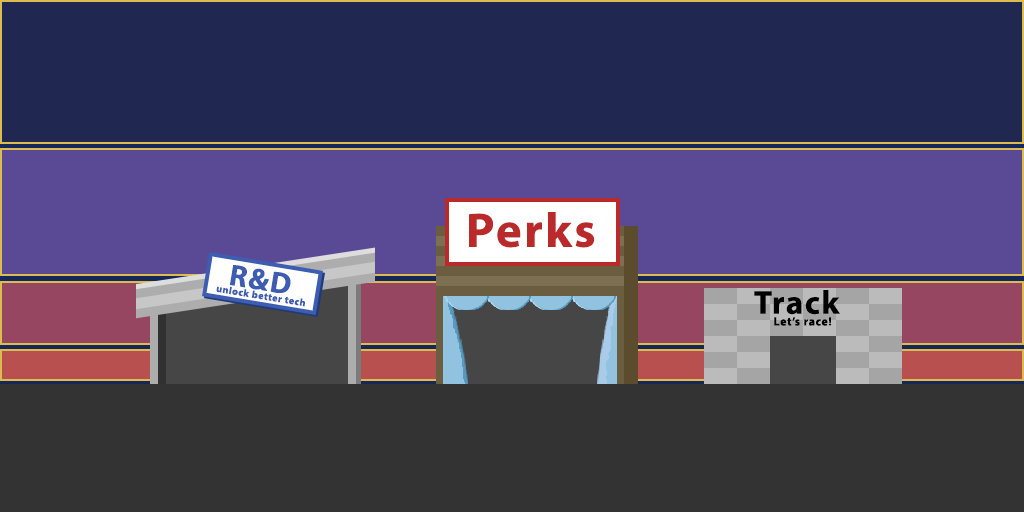
<style>
.page{position:relative;width:1024px;height:512px;background:#202751}
.page>*{position:absolute;margin:0}
.t1{font:48.8px "MyriadPro-Bold";letter-spacing:0.05em;color:#bb2a2a}
.t2{font:30.1px "MyriadPro-Bold";letter-spacing:0.05em;color:#3c5db1}
.t3{font:33.1px "MyriadPro-Bold";letter-spacing:0.05em;color:#000000}
.t4{font:12px "MyriadPro-Bold";letter-spacing:0.05em;color:#000000}
</style>
<div class="page">
<p class="t1" style="left:469px;top:212px;width:126px;height:36px">Perks</p>
<p class="t2" style="left:229px;top:265px;width:62px;height:28px;rotate:9deg">R&amp;D</p>
<p class="t3" style="left:754px;top:290px;width:86px;height:25px">Track</p>
<p class="t4" style="left:774px;top:317px;width:58px;height:9px">Let’s race!</p>
</div>
